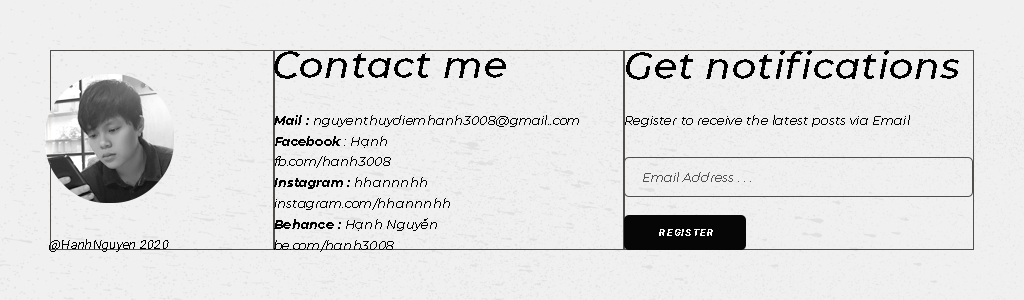
<style>
.page{position:relative;width:1024px;height:300px;background:#f0f0f0}
.page>*{position:absolute;margin:0}
.t1{font:37.5px "Montserrat-MediumItalic";letter-spacing:0.025em;color:#000000}
.t2{font:12.5px/20.8px "Montserrat-LightItalic";letter-spacing:0.025em;color:#000000}
.t3{font:12.5px/20.8px "Montserrat-BoldItalic";letter-spacing:0.025em;color:#000000}
.t4{font:12.5px "Montserrat-LightItalic";letter-spacing:0.025em;color:#000000}
.t5{font:12.5px "Montserrat-LightItalic";letter-spacing:0.025em;color:#525252}
.t6{font:10.2px "Roboto-BlackItalic";letter-spacing:0.1em;color:#ffffff;text-transform:uppercase}
.t7{font:12.5px "Roboto-ThinItalic";letter-spacing:0.025em;color:#000000}
</style>
<div class="page">
<p class="t1" style="left:274px;top:51px;width:232px;height:28px">Contact me</p>
<p class="t1" style="left:626px;top:50px;width:333px;height:30px">Get notifications</p>
<p class="t2" style="left:274px;top:115px;width:305px;height:137px"><span class="t3">Mail :</span> nguyenthuydiemhanh3008@gmail..com<br><span class="t3">Facebook </span>: Hạnh<br>fb.com/hanh3008<br><span class="t3">Instagram :</span> hhannnhh<br>instagram.com/hhannnhh<br><span class="t3">Behance :</span> Hạnh Nguyễn<br>be.com/hanh3008</p>
<p class="t4" style="left:625px;top:115px;width:285px;height:12px">Register to receive the latest posts via Email</p>
<p class="t5" style="left:643px;top:172px;width:108px;height:10px">Email Address . . .</p>
<p class="t6" style="left:659px;top:229px;width:54px;height:7px">register</p>
<p class="t7" style="left:49px;top:239px;width:120px;height:13px">@HanhNguyen 2020</p>
</div>
